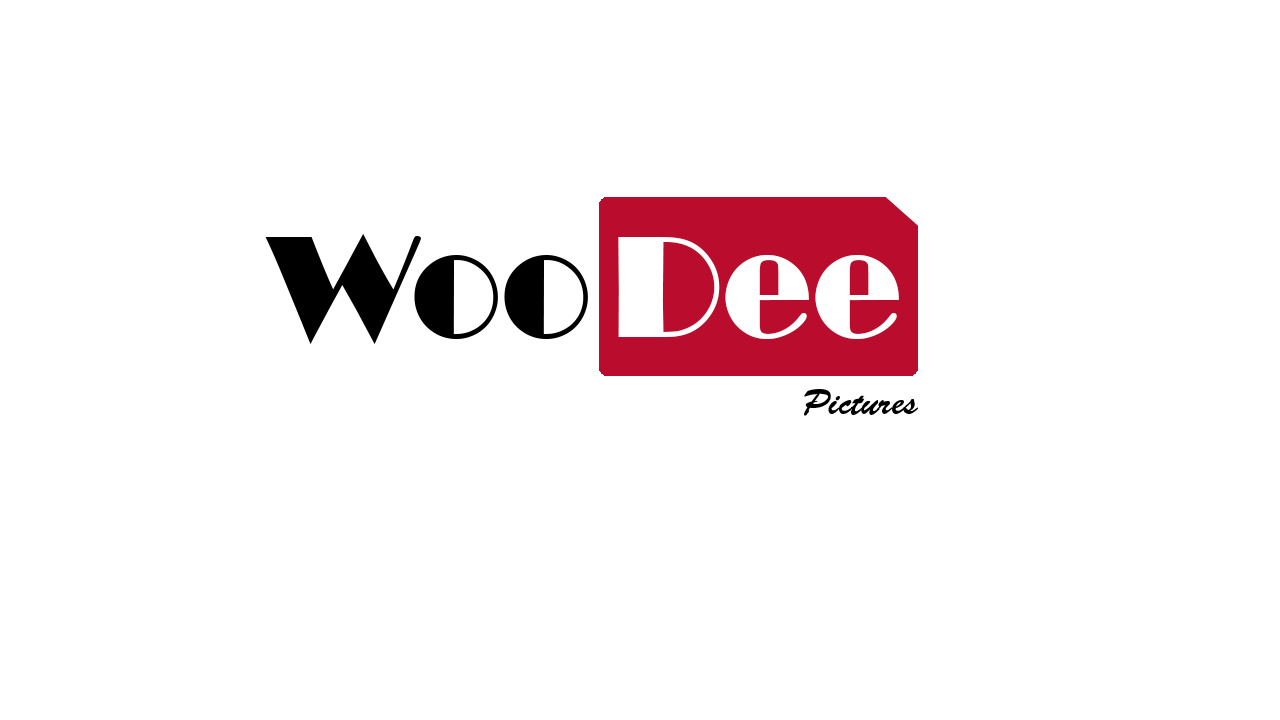
<style>
.page{position:relative;width:1280px;height:720px;background:#ffffff}
.page>*{position:absolute;margin:0}
.t1{font:150px "Broadway";color:#000000}
.t2{font:150px "Broadway";color:#ffffff}
.t3{font:36px "BrushScriptStd";color:#000000}
</style>
<div class="page">
<p class="t1" style="left:265px;top:234px;width:323px;height:110px">Woo</p>
<p class="t2" style="left:618px;top:237px;width:281px;height:102px">Dee</p>
<p class="t3" style="left:804px;top:389px;width:114px;height:27px">Pictures</p>
</div>
